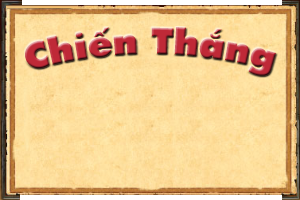
<style>
.page{position:relative;width:300px;height:200px}
.page>*{position:absolute;margin:0}
.t1{font:36px "UTM-Futura-Extra";color:#bf2937}
</style>
<div class="page">
<p class="t1" style="left:25px;top:27px;width:251px;height:49px">Chiến Thắng</p>
</div>
